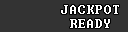
<style>
.page{position:relative;width:128px;height:32px;background:#333333}
.page>*{position:absolute;margin:0}
.t1{font:12px/14px "Terminal";letter-spacing:0.1em;color:#ffffff}
</style>
<div class="page">
<p class="t1" style="left:61px;top:5px;width:58px;height:23px;text-align:center">JACKPOT<br>READY</p>
</div>
